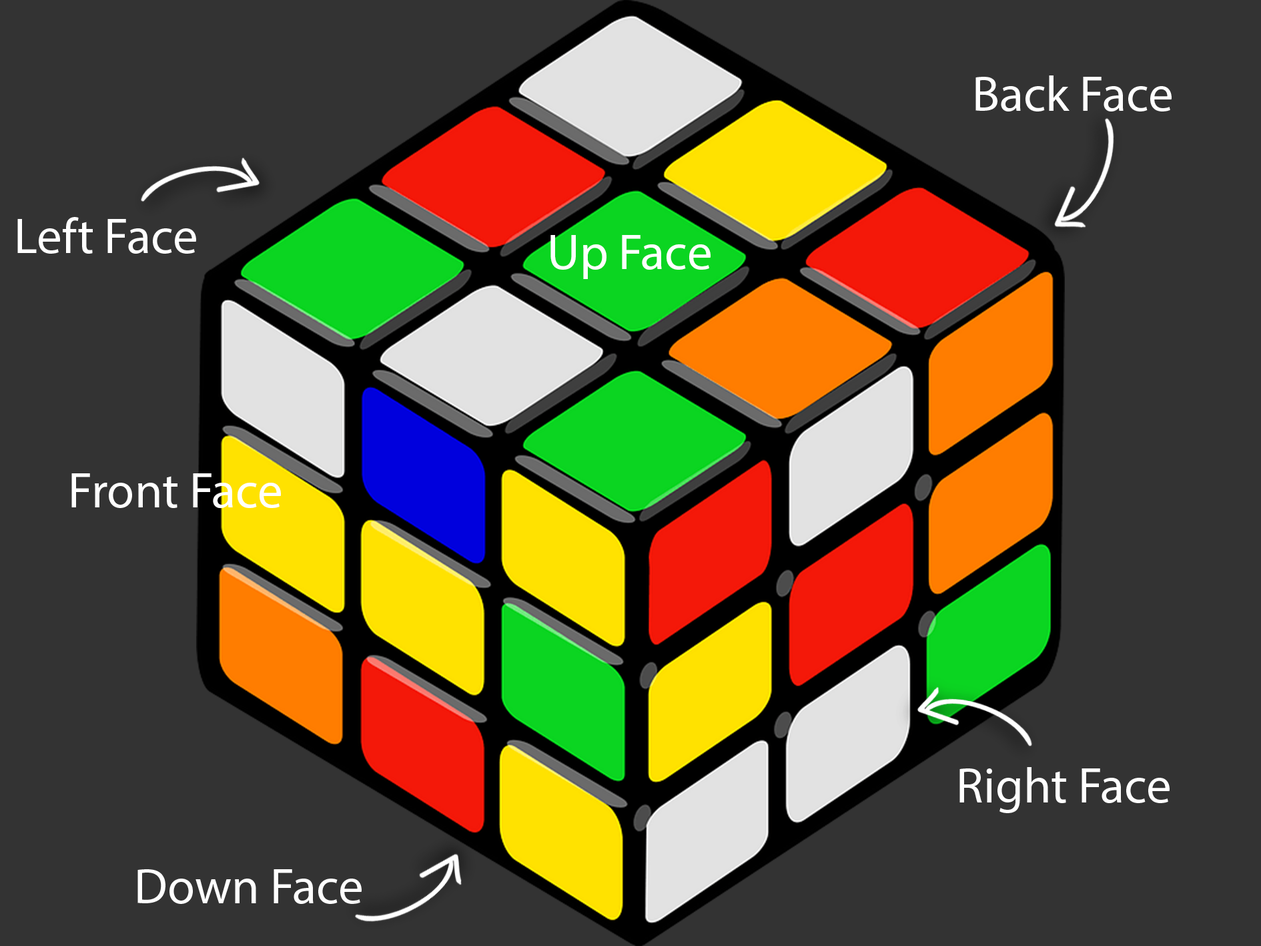
<style>
.page{position:relative;width:1261px;height:946px;background:#333333}
.page>*{position:absolute;margin:0}
.t1{font:50px "MyriadPro-Regular";color:#ffffff}
</style>
<div class="page">
<p class="t1" style="left:976px;top:75px;width:196px;height:36px">Back Face</p>
<p class="t1" style="left:17px;top:217px;width:179px;height:37px">Left Face</p>
<p class="t1" style="left:550px;top:235px;width:161px;height:44px">Up Face</p>
<p class="t1" style="left:71px;top:473px;width:210px;height:35px">Front Face</p>
<p class="t1" style="left:960px;top:767px;width:210px;height:46px">Right Face</p>
<p class="t1" style="left:137px;top:869px;width:225px;height:34px">Down Face</p>
</div>
